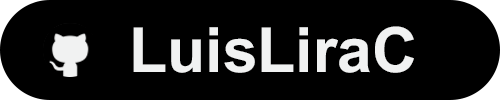
<style>
.page{position:relative;width:500px;height:100px;background:#000000}
.page>*{position:absolute;margin:0}
.t1{font:62.5px "Arial-BoldMT";color:#f1f2f2}
</style>
<div class="page">
<p class="t1" style="left:133px;top:26px;width:281px;height:47px">LuisLiraC</p>
</div>
